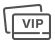
<style>
.page{position:relative;width:55px;height:45px;background:#ffffff}
.page>*{position:absolute;margin:0}
.t1{font:12px "AllianceNo.2-Bold";letter-spacing:0.05em;color:#515150;text-transform:uppercase}
</style>
<div class="page">
<p class="t1" style="left:22px;top:19px;width:22px;height:9px">VIP</p>
</div>
